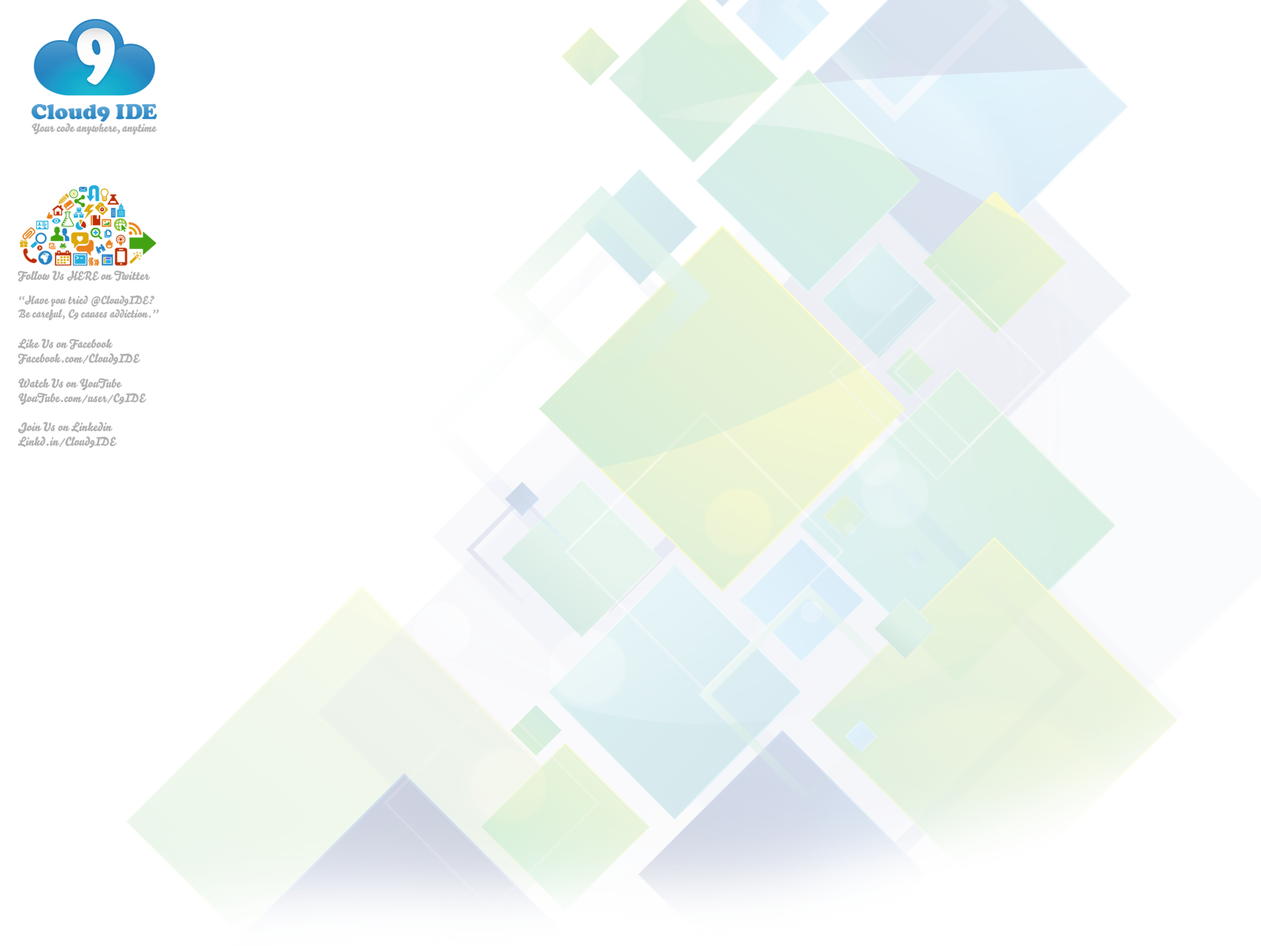
<style>
.page{position:relative;width:1261px;height:946px;background:#ffffff}
.page>*{position:absolute;margin:0}
.t1{font:12.1px "Bello-Script";color:#b0b0b0}
.t2{font:11.3px "Bello-Script";color:#b0b0b0}
</style>
<div class="page">
<p class="t1" style="left:17px;top:270px;width:134px;height:12px">Follow Us HERE on Twitter</p>
<p class="t2" style="left:18px;top:295px;width:141px;height:26px">“Have you tried @Cloud9IDE?<br>Be careful, C9 causes addiction.”</p>
<p class="t1" style="left:17px;top:338px;width:123px;height:27px">Like Us on Facebook<br>Facebook.com/Cloud9IDE</p>
<p class="t1" style="left:18px;top:377px;width:129px;height:28px">Watch Us on YouTube<br>YouTube.com/user/C9IDE</p>
<p class="t1" style="left:17px;top:422px;width:100px;height:26px">Join Us on Linkedin<br>Linkd.in/Cloud9IDE</p>
</div>
